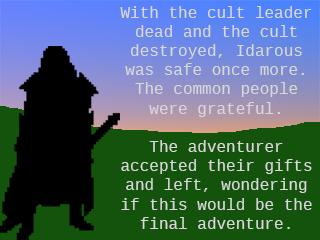
<style>
.page{position:relative;width:320px;height:240px;background:#13530b}
.page>*{position:absolute;margin:0}
.t1{font:16px "LiberationMono";color:#d8d8d8}
</style>
<div class="page">
<p class="t1" style="left:120px;top:6px;width:192px;height:223px;text-align:center">With the cult leader dead and the cult destroyed, Idarous was safe once more. The common people were grateful.<br><br>The adventurer accepted their gifts and left, wondering if this would be the final adventure.</p>
</div>
